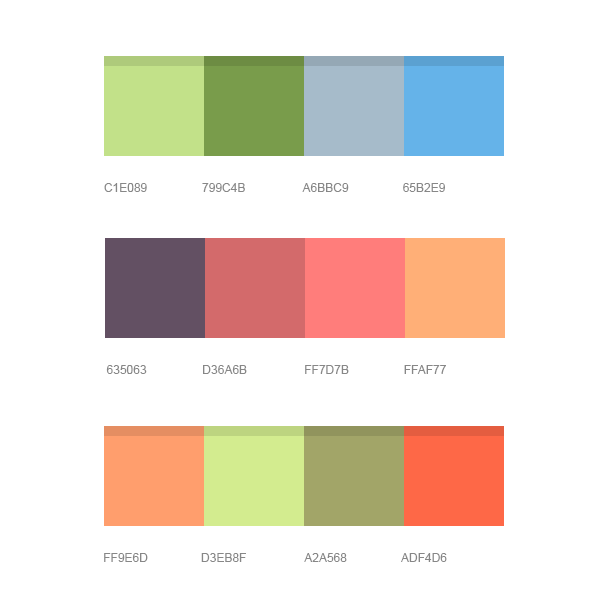
<style>
.page{position:relative;width:600px;height:600px;background:#ffffff}
.page>*{position:absolute;margin:0}
.t1{font:12px "ArialMT";color:#878787;text-transform:uppercase}
</style>
<div class="page">
<p class="t1" style="left:104px;top:183px;width:43px;height:9px">c1e089</p>
<p class="t1" style="left:202px;top:183px;width:43px;height:9px">799c4b</p>
<p class="t1" style="left:302px;top:183px;width:47px;height:9px">a6bbc9</p>
<p class="t1" style="left:403px;top:183px;width:42px;height:9px">65b2e9</p>
<p class="t1" style="left:106px;top:365px;width:41px;height:9px">635063</p>
<p class="t1" style="left:203px;top:365px;width:44px;height:9px">d36a6b</p>
<p class="t1" style="left:305px;top:365px;width:44px;height:9px">ff7d7b</p>
<p class="t1" style="left:404px;top:365px;width:42px;height:9px">ffaf77</p>
<p class="t1" style="left:104px;top:553px;width:44px;height:9px">ff9e6d</p>
<p class="t1" style="left:201px;top:553px;width:45px;height:9px">d3eb8f</p>
<p class="t1" style="left:304px;top:553px;width:43px;height:9px">a2a568</p>
<p class="t1" style="left:401px;top:553px;width:46px;height:9px">adf4d6</p>
</div>
